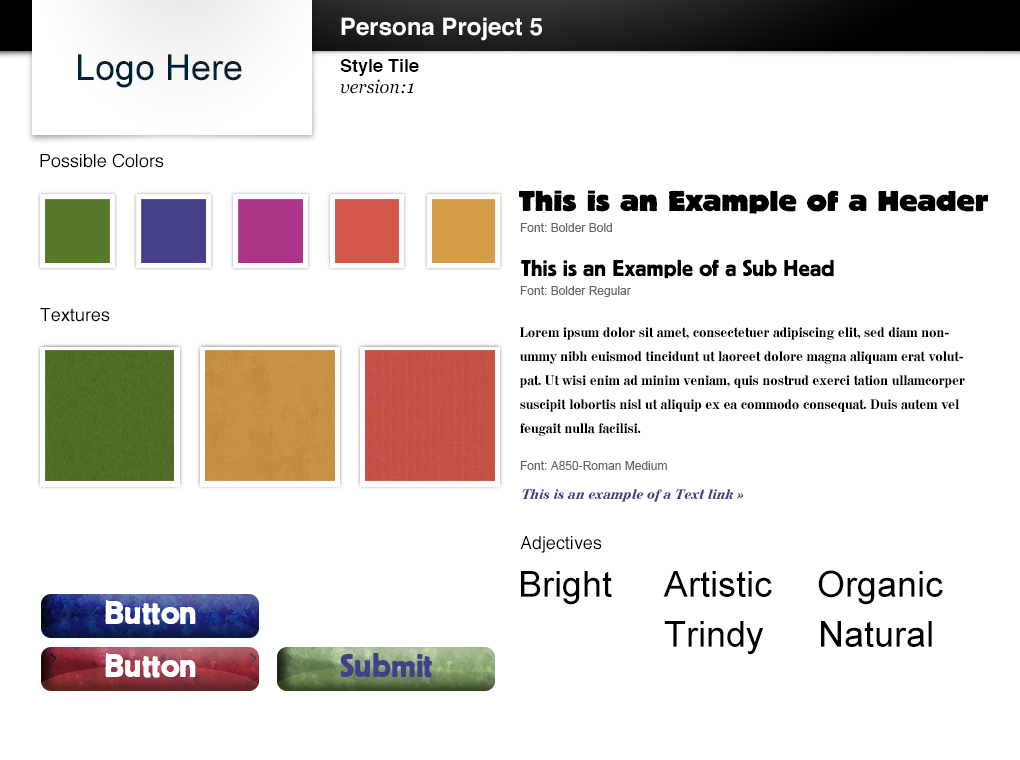
<style>
.page{position:relative;width:1020px;height:760px;background:#ffffff}
.page>*{position:absolute;margin:0}
.t1{font:24px "Helvetica-Bold";color:#ffffff}
.t2{font:36px "ArialMT";color:#002035}
.t3{font:18px "Helvetica-Bold";color:#000000}
.t4{font:18px "Georgia-Italic";color:#000000}
.t5{font:18px "Helvetica";color:#000000}
.t6{font:30px "BoulderBold";color:#000000}
.t7{font:12px "ArialMT";color:#666666}
.t8{font:24px "Boulder";color:#000000}
.t9{font:14px/24px "A850RomanMedium";color:#000000}
.t10{font:14px "A850RomanBoldItalic";color:#434088}
.t11{font:36px "ArialMT";color:#000000}
.t12{font:35px "Boulder";color:#ffffff}
.t13{font:35px "Boulder";color:#434088}
</style>
<div class="page">
<p class="t1" style="left:341px;top:17px;width:201px;height:24px">Persona Project 5</p>
<p class="t2" style="left:78px;top:54px;width:164px;height:34px">Logo Here</p>
<p class="t3" style="left:340px;top:59px;width:79px;height:17px">Style Tile</p>
<p class="t4" style="left:340px;top:79px;width:74px;height:15px">version:1</p>
<p class="t5" style="left:40px;top:153px;width:124px;height:15px">Possible Colors</p>
<p class="t6" style="left:519px;top:190px;width:470px;height:24px">This is an Example of a Header</p>
<p class="t7" style="left:520px;top:223px;width:92px;height:9px">Font: Bolder Bold</p>
<p class="t8" style="left:521px;top:259px;width:313px;height:20px">This is an Example of a Sub Head</p>
<p class="t7" style="left:520px;top:286px;width:111px;height:11px">Font: Bolder Regular</p>
<p class="t5" style="left:40px;top:308px;width:70px;height:14px">Textures</p>
<p class="t9" style="left:520px;top:327px;width:445px;height:109px">Lorem ipsum dolor sit amet, consectetuer adipiscing elit, sed diam nonummy nibh euismod tincidunt ut laoreet dolore magna aliquam erat volutpat. Ut wisi enim ad minim veniam, quis nostrud exerci tation ullamcorper suscipit lobortis nisl ut aliquip ex ea commodo consequat. Duis autem vel feugait nulla facilisi.</p>
<p class="t7" style="left:520px;top:461px;width:147px;height:9px">Font: A850-Roman Medium</p>
<p class="t10" style="left:522px;top:489px;width:222px;height:13px">This is an example of a Text link »</p>
<p class="t5" style="left:520px;top:536px;width:82px;height:17px">Adjectives</p>
<p class="t11" style="left:521px;top:571px;width:91px;height:34px">Bright</p>
<p class="t11" style="left:663px;top:571px;width:109px;height:26px">Artistic</p>
<p class="t11" style="left:818px;top:570px;width:125px;height:35px">Organic</p>
<p class="t12" style="left:105px;top:600px;width:91px;height:25px">Button</p>
<p class="t11" style="left:664px;top:621px;width:100px;height:34px">Trindy</p>
<p class="t11" style="left:821px;top:621px;width:111px;height:26px">Natural</p>
<p class="t12" style="left:105px;top:653px;width:91px;height:25px">Button</p>
<p class="t13" style="left:340px;top:653px;width:92px;height:25px">Submit</p>
</div>
